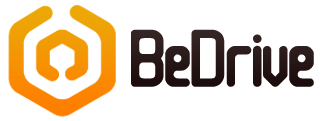
<style>
.page{position:relative;width:326px;height:121px;background:#ffffff}
.page>*{position:absolute;margin:0}
.t1{font:81px "Nowadays";letter-spacing:-0.035em;color:#221313}
</style>
<div class="page">
<p class="t1" style="left:131px;top:29px;width:183px;height:58px">BeDrive</p>
</div>
